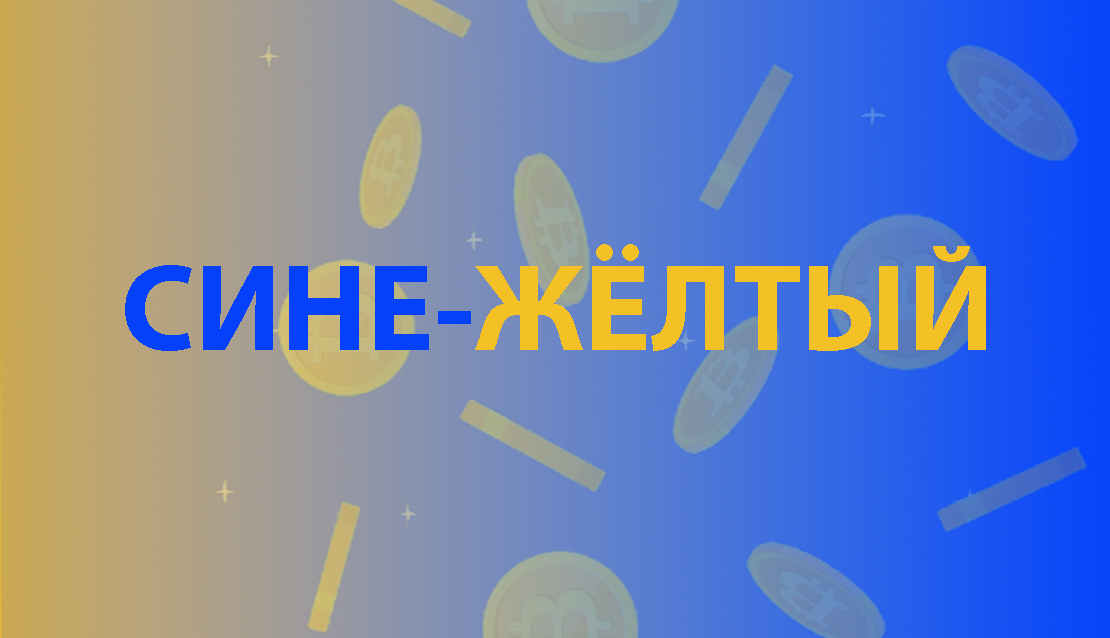
<style>
.page{position:relative;width:1110px;height:638px}
.page>*{position:absolute;margin:0}
.t1{font:125px "MyriadPro-Bold";color:#f3c125}
.t2{font:125px "MyriadPro-Bold";color:#0541fb}
</style>
<div class="page">
<p class="t1" style="left:125px;top:244px;width:861px;height:107px"><span class="t2">СИНЕ-</span>ЖЁЛТЫЙ</p>
</div>
